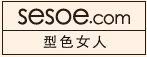
<style>
.page{position:relative;width:147px;height:57px;background:#fff2e4}
.page>*{position:absolute;margin:0}
.t1{font:28px "STXihei";letter-spacing:-0.025em;color:#261d13}
.t2{font:18px "STXihei";letter-spacing:-0.025em;color:#261d13}
.t3{font:14px "STXihei";letter-spacing:0.2em;color:#18120c}
</style>
<div class="page">
<p class="t1" style="left:18px;top:8px;width:112px;height:17px">sesoe<span class="t2">.com</span></p>
<p class="t3" style="left:43px;top:35px;width:63px;height:13px">型色女人</p>
</div>
